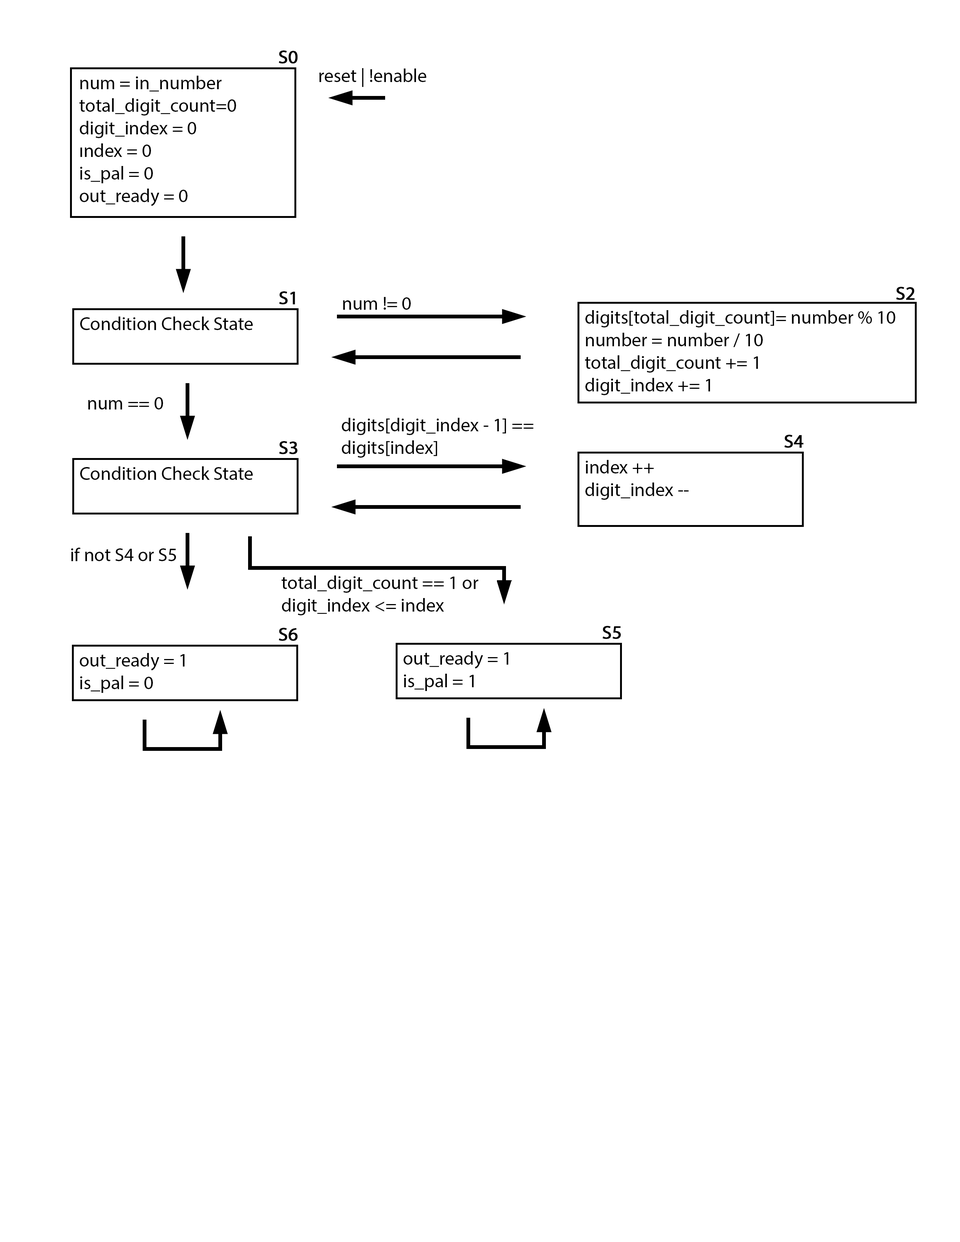
<style>
.page{position:relative;width:960px;height:1242px;background:#ffffff}
.page>*{position:absolute;margin:0}
.t1{font:18.8px "MyriadPro-Regular";color:#000000;font-weight:bold}
.t2{font:18.8px "MyriadPro-Regular";color:#000000}
</style>
<div class="page">
<p class="t1" style="left:279px;top:50px;width:19px;height:14px">S0</p>
<p class="t2" style="left:79px;top:76px;width:157px;height:130px">num = in_number<br>total_digit_count=0<br>digit_index = 0<br>ındex = 0<br>is_pal = 0<br>out_ready = 0</p>
<p class="t2" style="left:319px;top:68px;width:108px;height:19px">reset | !enable</p>
<p class="t1" style="left:279px;top:291px;width:16px;height:14px">S1</p>
<p class="t1" style="left:896px;top:287px;width:19px;height:13px">S2</p>
<p class="t2" style="left:343px;top:297px;width:68px;height:13px">num != 0</p>
<p class="t2" style="left:80px;top:317px;width:173px;height:13px">Condition Check State</p>
<p class="t2" style="left:585px;top:310px;width:310px;height:85px">digits[total_digit_count]= number % 10<br>number = number / 10<br>total_digit_count += 1<br>digit_index += 1</p>
<p class="t2" style="left:88px;top:397px;width:75px;height:13px">num == 0</p>
<p class="t2" style="left:342px;top:418px;width:191px;height:40px">digits[digit_index - 1] ==<br>digits[index]</p>
<p class="t1" style="left:784px;top:435px;width:19px;height:13px">S4</p>
<p class="t1" style="left:279px;top:441px;width:18px;height:13px">S3</p>
<p class="t2" style="left:585px;top:460px;width:103px;height:40px">index ++<br>digit_index --</p>
<p class="t2" style="left:80px;top:466px;width:173px;height:14px">Condition Check State</p>
<p class="t2" style="left:71px;top:548px;width:105px;height:13px">if not S4 or S5</p>
<p class="t2" style="left:282px;top:576px;width:196px;height:39px">total_digit_count == 1 or digit_index &lt;= index</p>
<p class="t1" style="left:279px;top:628px;width:19px;height:13px">S6</p>
<p class="t1" style="left:602px;top:626px;width:19px;height:13px">S5</p>
<p class="t2" style="left:80px;top:653px;width:104px;height:40px">out_ready = 1<br>is_pal = 0</p>
<p class="t2" style="left:404px;top:651px;width:104px;height:40px">out_ready = 1<br>is_pal = 1</p>
</div>
